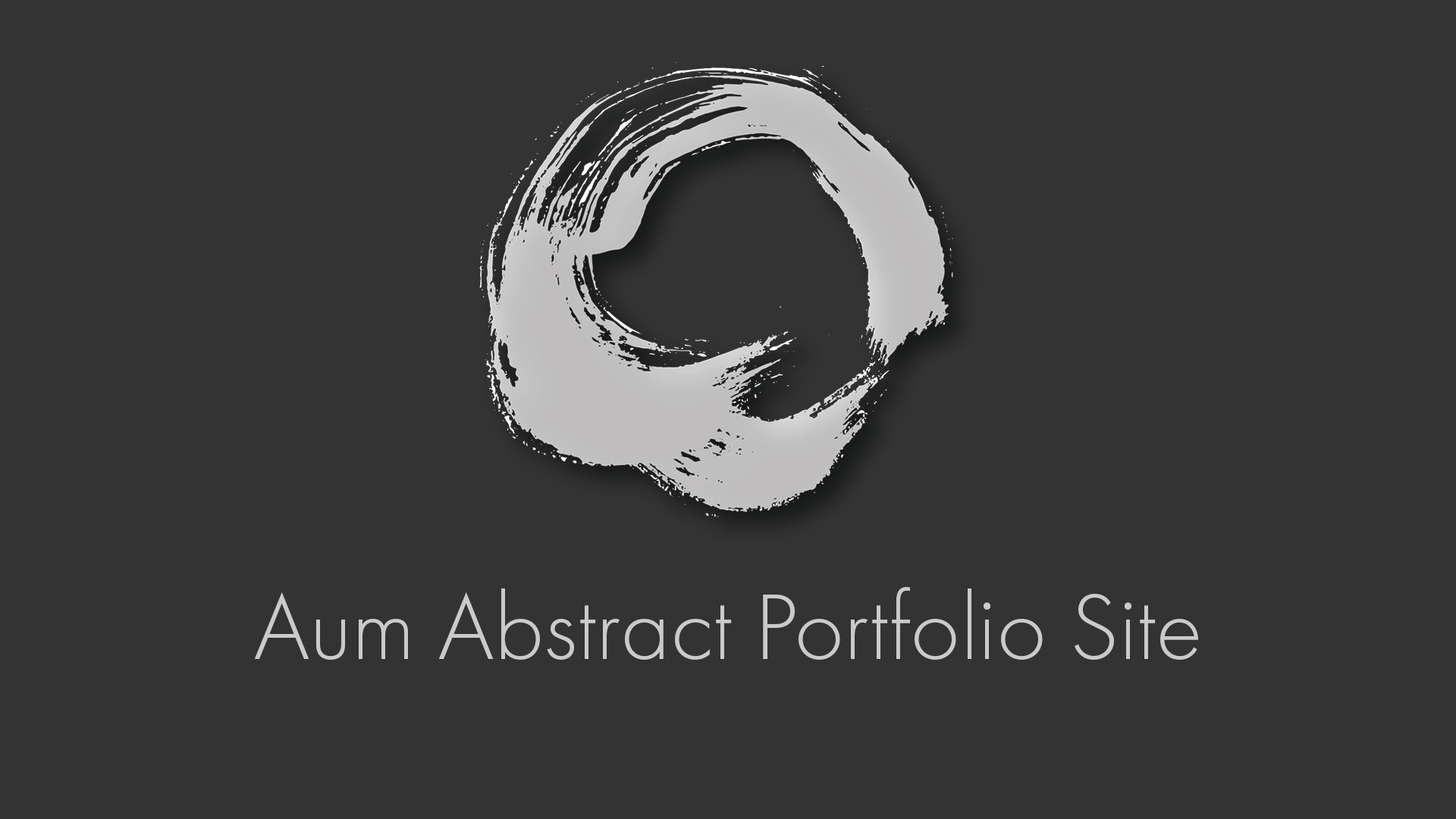
<style>
.page{position:relative;width:1456px;height:819px;background:#333333}
.page>*{position:absolute;margin:0}
.t1{font:97.1px "FuturaPT-Light";color:#cbc9c9}
</style>
<div class="page">
<p class="t1" style="left:254px;top:587px;width:944px;height:73px">Aum Abstract Portfolio Site</p>
</div>
